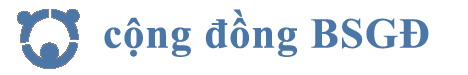
<style>
.page{position:relative;width:468px;height:75px;background:#ffffff}
.page>*{position:absolute;margin:0}
.t1{font:42.7px "TimesNewRomanPS-BoldMT";letter-spacing:0.025em;color:#4a76a8}
</style>
<div class="page">
<p class="t1" style="left:104px;top:9px;width:325px;height:48px">cộng đồng BSGĐ</p>
</div>
